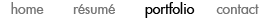
<style>
.page{position:relative;width:259px;height:19px;background:#ffffff}
.page>*{position:absolute;margin:0}
.t1{font:14px "FuturaLT";color:#767676}
.t2{font:14px "FuturaLT";color:#000000}
.t3{font:14px "FuturaLT";color:#757575}
</style>
<div class="page">
<p class="t1" style="left:11px;top:2px;width:33px;height:12px">home</p>
<p class="t1" style="left:73px;top:4px;width:42px;height:10px">résumé</p>
<p class="t2" style="left:145px;top:2px;width:50px;height:16px">portfolio</p>
<p class="t3" style="left:216px;top:4px;width:43px;height:10px">contact</p>
</div>
